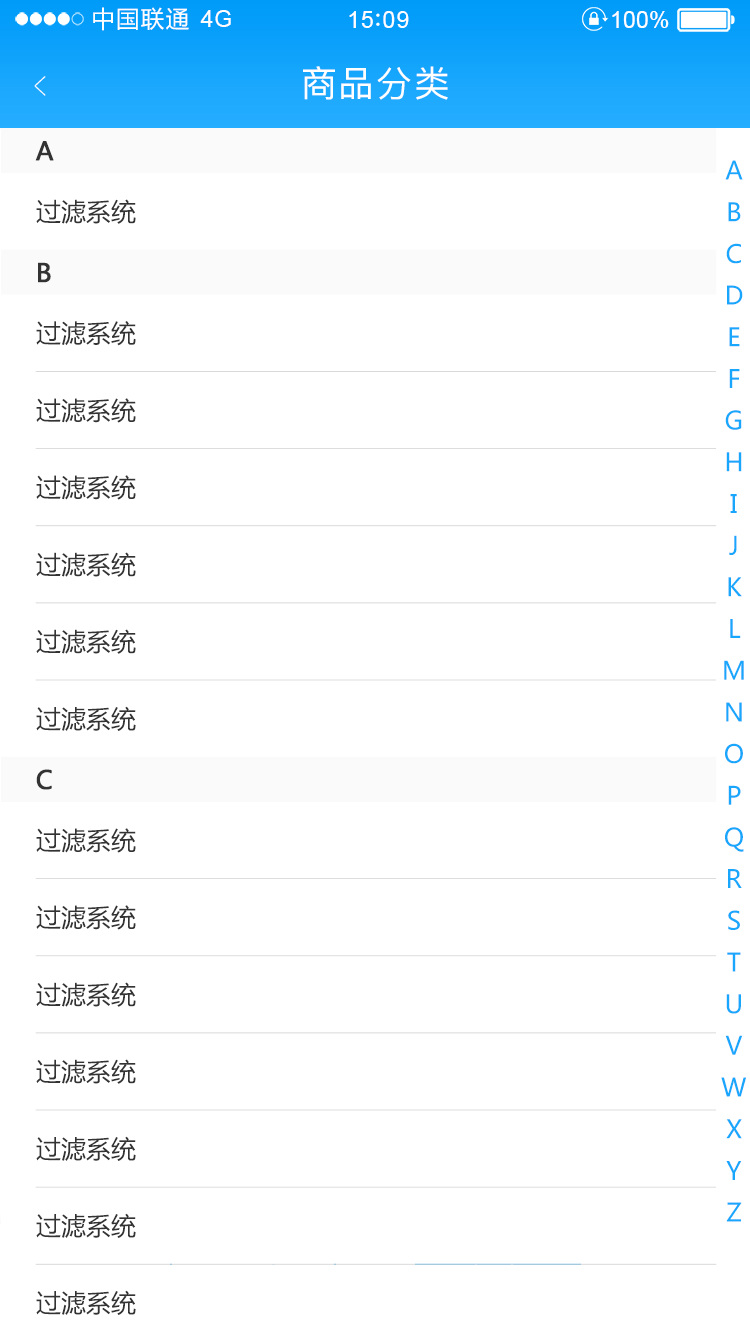
<style>
.page{position:relative;width:750px;height:1334px;background:#ffffff}
.page>*{position:absolute;margin:0}
.t1{font:23.4px "MicrosoftYaHei";letter-spacing:0.06em;color:#ffffff}
.t2{font:23.4px "ArialMT";letter-spacing:0.02em;color:#ffffff}
.t3{font:23.4px "ArialMT";letter-spacing:0.04em;color:#ffffff}
.t4{font:23.4px "ArialMT";color:#ffffff}
.t5{font:39px "PingFang-SC-ExtraLight";letter-spacing:0.1em;color:#ffffff;scale:0.51 1}
.t6{font:36px "PingFang-SC-Medium";letter-spacing:0.05em;color:#ffffff}
.t7{font:25px "MicrosoftYaHei";color:#333333;text-transform:uppercase;font-weight:bold}
.t8{font:25px/41.7px "MicrosoftYaHei";color:#19a7fd;text-transform:uppercase}
.t9{font:25px "MicrosoftYaHei";color:#333333;text-transform:uppercase}
</style>
<div class="page">
<p class="t1" style="left:93px;top:7px;width:96px;height:24px">中国联通</p>
<p class="t2" style="left:200px;top:10px;width:31px;height:17px">4G</p>
<p class="t3" style="left:349px;top:11px;width:60px;height:17px">15 09</p>
<p class="t4" style="left:612px;top:11px;width:57px;height:17px">100%</p>
<p class="t5" style="left:34px;top:76px;width:12px;height:20px;rotate:180deg">&gt;</p>
<p class="t6" style="left:303px;top:66px;width:145px;height:34px">商品分类</p>
<p class="t7" style="left:35px;top:141px;width:19px;height:20px">a</p>
<p class="t8" style="left:721px;top:160px;width:25px;height:1062px;text-align:center">a<br>b<br>c<br>d<br>e<br>f<br>g<br>h<br>i<br>j<br>k<br>l<br>m<br>n<br>o<br>p<br>q<br>r<br>s<br>t<br>u<br>v<br>w<br>x<br>y<br>z</p>
<p class="t9" style="left:36px;top:199px;width:100px;height:25px">过滤系统</p>
<p class="t7" style="left:38px;top:262px;width:13px;height:21px">b</p>
<p class="t9" style="left:36px;top:321px;width:100px;height:25px">过滤系统</p>
<p class="t9" style="left:36px;top:398px;width:100px;height:25px">过滤系统</p>
<p class="t9" style="left:36px;top:475px;width:100px;height:25px">过滤系统</p>
<p class="t9" style="left:36px;top:552px;width:100px;height:25px">过滤系统</p>
<p class="t9" style="left:36px;top:629px;width:100px;height:25px">过滤系统</p>
<p class="t9" style="left:36px;top:706px;width:100px;height:25px">过滤系统</p>
<p class="t7" style="left:36px;top:769px;width:16px;height:21px">c</p>
<p class="t9" style="left:36px;top:828px;width:100px;height:25px">过滤系统</p>
<p class="t9" style="left:36px;top:905px;width:100px;height:25px">过滤系统</p>
<p class="t9" style="left:36px;top:982px;width:100px;height:25px">过滤系统</p>
<p class="t9" style="left:36px;top:1059px;width:100px;height:25px">过滤系统</p>
<p class="t9" style="left:36px;top:1136px;width:100px;height:25px">过滤系统</p>
<p class="t9" style="left:36px;top:1213px;width:100px;height:25px">过滤系统</p>
<p class="t9" style="left:36px;top:1290px;width:100px;height:25px">过滤系统</p>
</div>
